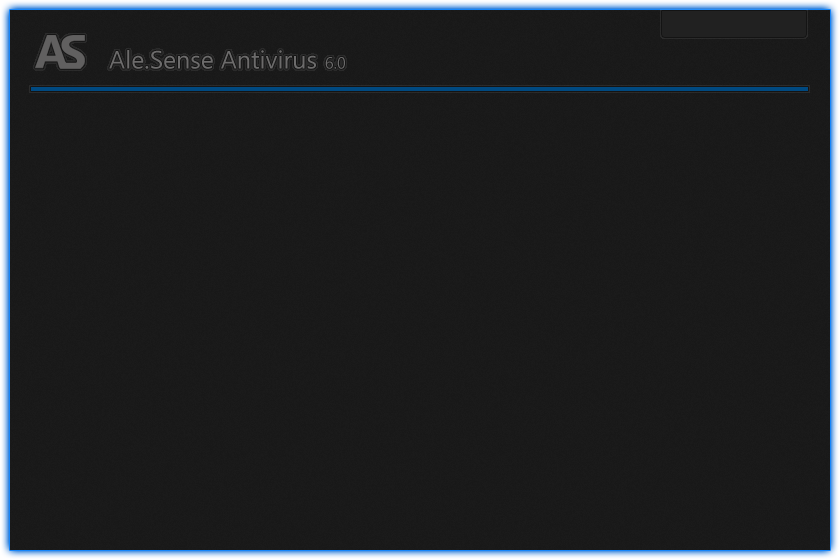
<style>
.page{position:relative;width:840px;height:560px;background:#1a1a1a}
.page>*{position:absolute;margin:0}
.t1{font:25px "Ebrima";color:#6c6b6b}
.t2{font:16px "Ebrima";color:#6c6b6b}
</style>
<div class="page">
<p class="t1" style="left:109px;top:50px;width:236px;height:19px">Ale.Sense Antivirus <span class="t2">6.0</span></p>
</div>
